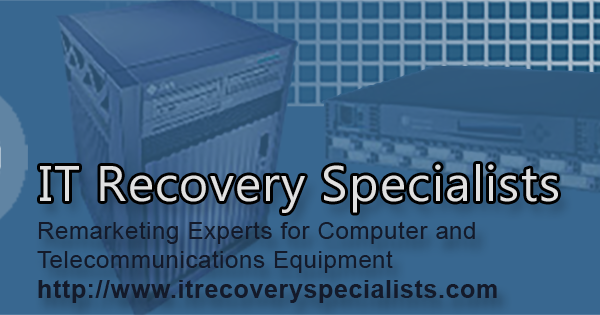
<style>
.page{position:relative;width:600px;height:315px}
.page>*{position:absolute;margin:0}
.t1{font:50px "MicrosoftTaiLe";letter-spacing:0.025em;color:#e0e0e0}
.t2{font:24.1px "ArialMT";letter-spacing:0.025em;color:#141a2a}
.t3{font:25px "Arial-BoldMT";letter-spacing:0.025em;color:#141a2a}
</style>
<div class="page">
<p class="t1" style="left:40px;top:164px;width:518px;height:49px">IT Recovery Specialists</p>
<p class="t2" style="left:37px;top:221px;width:460px;height:82px">Remarketing Experts for Computer and <br>Telecommunications Equipment<br><span class="t3">http://www.itrecoveryspecialists.com</span></p>
</div>
